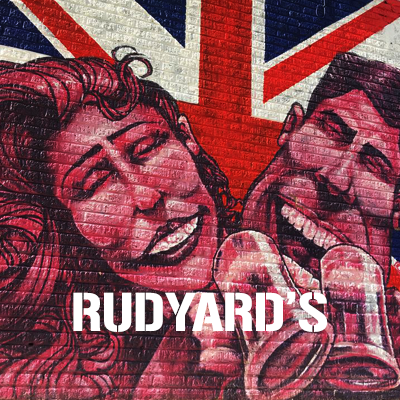
<style>
.page{position:relative;width:400px;height:400px}
.page>*{position:absolute;margin:0}
.t1{font:48px "Gunplay-Regular";color:#ffffff}
</style>
<div class="page">
<p class="t1" style="left:73px;top:291px;width:255px;height:41px">RUDYARD’S</p>
</div>
